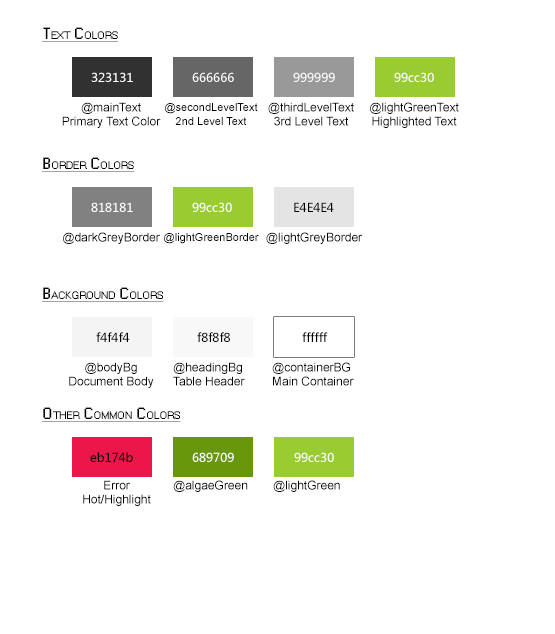
<style>
.page{position:relative;width:555px;height:634px;background:#ffffff}
.page>*{position:absolute;margin:0}
.t1{font:14px "MS Sans Serif";color:#000000;font-variant:small-caps;font-weight:bold;text-decoration:underline}
.t2{font:12px "MicrosoftYaHei";color:#ffffff}
.t3{font:12px/14px "ArialMT";color:#000000}
.t4{font:11px/14px "ArialMT";color:#000000}
.t5{font:12px "MicrosoftYaHei";color:#030000}
.t6{font:12px "ArialMT";color:#000000}
.t7{font:11px "ArialMT";color:#000000}
.t8{font:12px "MicrosoftYaHei";color:#020000}
.t9{font:12px "MicrosoftYaHei";color:#000000}
.t10{font:12px/14px "ArialMT";color:#020000}
</style>
<div class="page">
<p class="t1" style="left:42px;top:27px;width:76px;height:15px">Text Colors</p>
<p class="t2" style="left:91px;top:72px;width:42px;height:10px">323131</p>
<p class="t2" style="left:192px;top:72px;width:42px;height:10px">666666</p>
<p class="t2" style="left:293px;top:72px;width:42px;height:10px">999999</p>
<p class="t2" style="left:394px;top:72px;width:40px;height:10px">99cc30</p>
<p class="t3" style="left:62px;top:102px;width:99px;height:26px;text-align:center">@mainText<br>Primary Text Color</p>
<p class="t3" style="left:268px;top:102px;width:86px;height:24px;text-align:center">@thirdLevelText<br>3rd Level Text</p>
<p class="t3" style="left:370px;top:102px;width:89px;height:26px;text-align:center">@lightGreenText<br>Highlighted Text</p>
<p class="t4" style="left:165px;top:103px;width:93px;height:22px;text-align:center">@secondLevelText<br>2nd Level Text</p>
<p class="t1" style="left:42px;top:157px;width:93px;height:15px">Border Colors</p>
<p class="t2" style="left:91px;top:202px;width:42px;height:10px">818181</p>
<p class="t2" style="left:192px;top:202px;width:40px;height:10px">99cc30</p>
<p class="t5" style="left:294px;top:202px;width:40px;height:10px">E4E4E4</p>
<p class="t6" style="left:63px;top:232px;width:97px;height:12px">@darkGreyBorder</p>
<p class="t7" style="left:164px;top:233px;width:95px;height:11px">@lightGreenBorder</p>
<p class="t6" style="left:266px;top:232px;width:97px;height:12px">@lightGreyBorder</p>
<p class="t1" style="left:42px;top:287px;width:122px;height:15px">Background Colors</p>
<p class="t8" style="left:96px;top:332px;width:34px;height:10px">f4f4f4</p>
<p class="t9" style="left:197px;top:332px;width:33px;height:10px">f8f8f8</p>
<p class="t9" style="left:302px;top:332px;width:26px;height:10px">ffffff</p>
<p class="t3" style="left:69px;top:362px;width:85px;height:26px;text-align:center">@bodyBg<br>Document Body</p>
<p class="t3" style="left:173px;top:362px;width:72px;height:24px">@headingBg<br>Table Header</p>
<p class="t3" style="left:272px;top:362px;width:82px;height:24px">@containerBG<br>Main Container</p>
<p class="t1" style="left:42px;top:407px;width:139px;height:15px">Other Common Colors</p>
<p class="t8" style="left:90px;top:452px;width:43px;height:10px">eb174b</p>
<p class="t2" style="left:192px;top:452px;width:42px;height:10px">689709</p>
<p class="t2" style="left:294px;top:452px;width:40px;height:10px">99cc30</p>
<p class="t10" style="left:83px;top:480px;width:68px;height:26px;text-align:center">Error<br>Hot/Highlight</p>
<p class="t6" style="left:173px;top:480px;width:75px;height:12px">@algaeGreen</p>
<p class="t6" style="left:273px;top:480px;width:67px;height:12px">@lightGreen</p>
</div>
